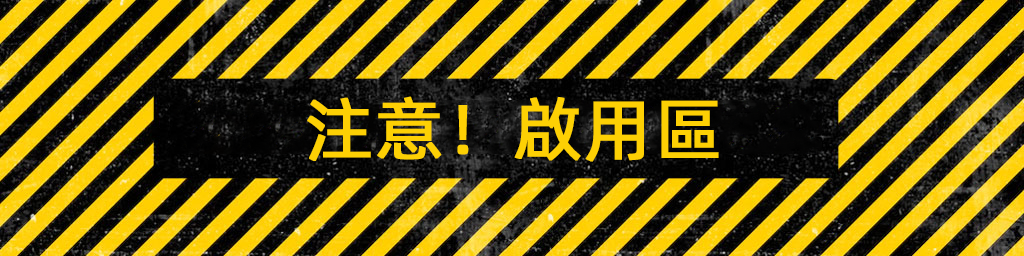
<style>
.page{position:relative;width:1024px;height:256px}
.page>*{position:absolute;margin:0}
.t1{font:69px "AlibabaPuHuiTiR";color:#fdd004;font-weight:bold}
</style>
<div class="page">
<p class="t1" style="left:307px;top:96px;width:412px;height:66px">注意！啟用區</p>
</div>
